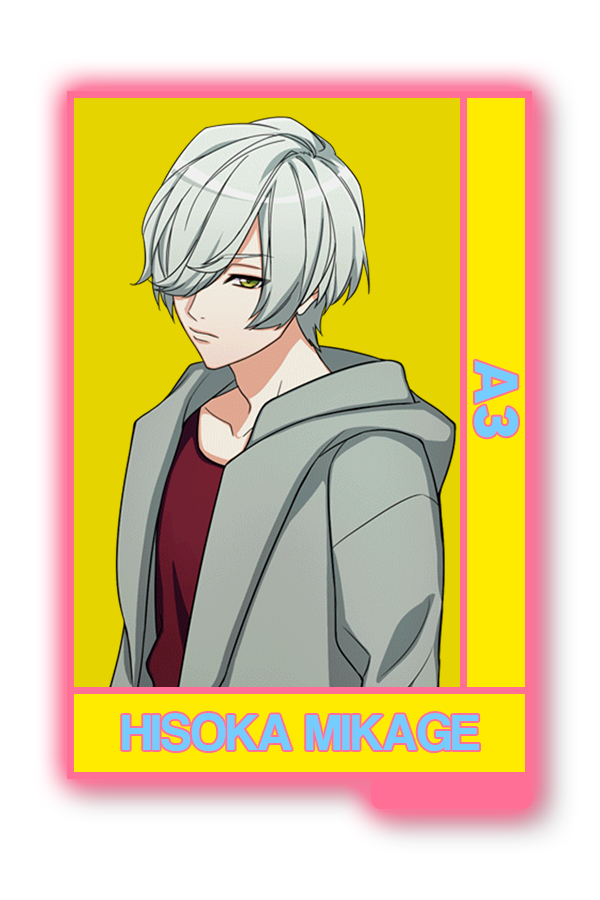
<style>
.page{position:relative;width:600px;height:900px;background:#ffffff}
.page>*{position:absolute;margin:0}
.t1{font:60.5px "MADETOMMY-Bold";color:#74ccff}
.t2{font:52.7px "CoolveticaRg-Regular";color:#74ccff}
</style>
<div class="page">
<p class="t1" style="left:474px;top:360px;width:44px;height:78px;rotate:90deg">A3</p>
<p class="t2" style="left:122px;top:713px;width:357px;height:38px">HISOKA MIKAGE</p>
</div>
